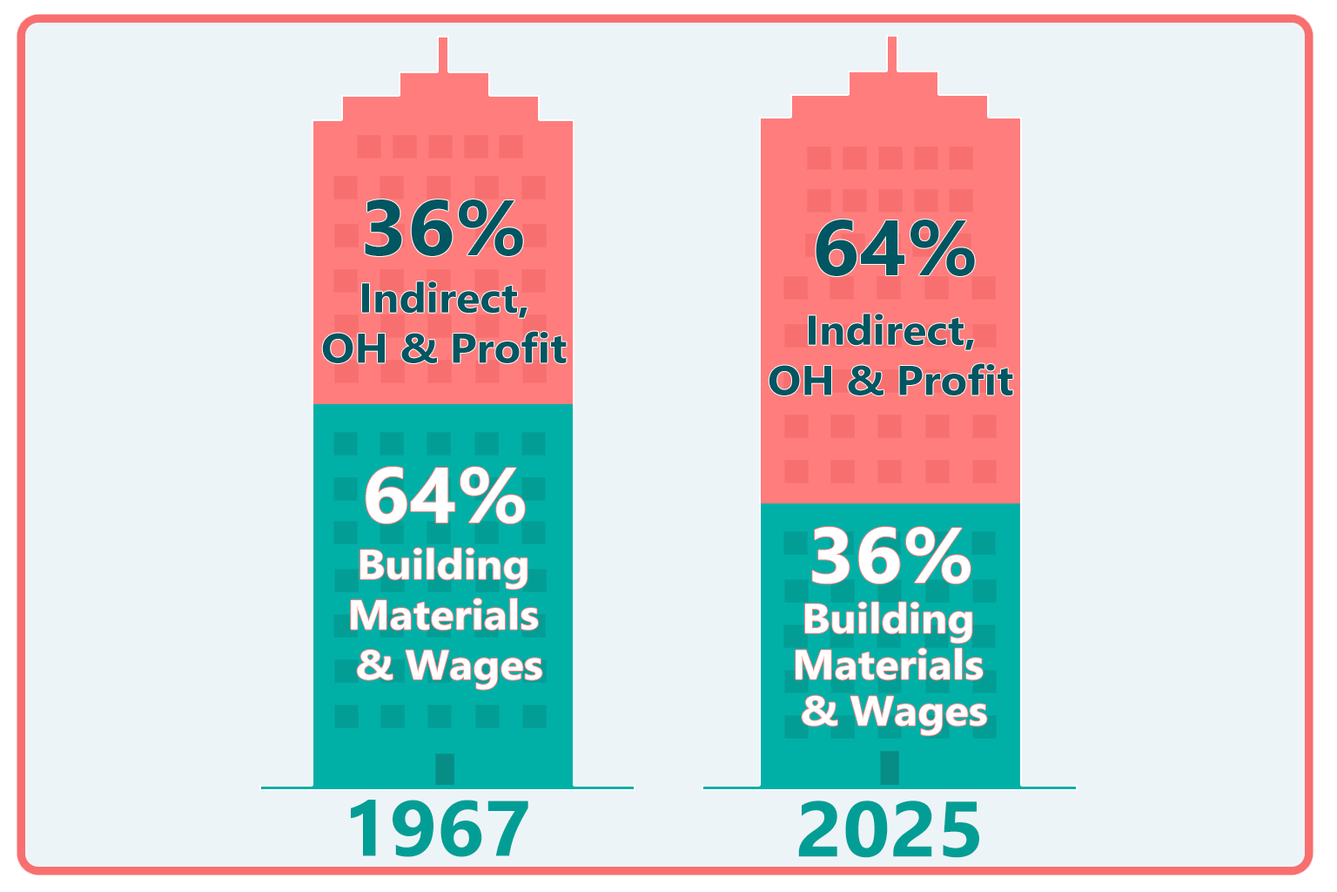
<style>
.page{position:relative;width:1337px;height:892px;background:#edf4f7}
.page>*{position:absolute;margin:0}
.t1{font:78.4px "SegoeUI-Bold";color:#005661;scale:1.05 1}
.t2{font:41.8px "SegoeUI-Bold";color:#005661;scale:1.05 1}
.t3{font:78.4px "SegoeUI-Bold";color:#ffffff;scale:1.05 1}
.t4{font:41.8px "SegoeUI-Bold";color:#ffffff;scale:1.05 1}
.t5{font:41.8px/46.1px "SegoeUI-Bold";color:#ffffff;scale:1.05 1}
.t6{font:78.4px "SegoeUI-Bold";color:#029e96;scale:1.05 1}
</style>
<div class="page">
<p class="t1" style="left:365px;top:199px;width:158px;height:57px">36%</p>
<p class="t1" style="left:816px;top:219px;width:159px;height:57px">64%</p>
<p class="t2" style="left:322px;top:281px;width:245px;height:82px;text-align:center">Indirect,<br>OH &amp; Profit</p>
<p class="t2" style="left:769px;top:313px;width:245px;height:82px;text-align:center">Indirect,<br>OH &amp; Profit</p>
<p class="t3" style="left:366px;top:467px;width:159px;height:56px">64%</p>
<p class="t3" style="left:812px;top:527px;width:159px;height:56px">36%</p>
<p class="t4" style="left:351px;top:548px;width:191px;height:142px;text-align:center">Building <br>Materials <br>&amp; Wages</p>
<p class="t5" style="left:796px;top:602px;width:191px;height:134px;text-align:center">Building <br>Materials <br>&amp; Wages</p>
<p class="t6" style="left:351px;top:799px;width:178px;height:58px">1967</p>
<p class="t6" style="left:798px;top:800px;width:182px;height:58px">2025</p>
</div>
